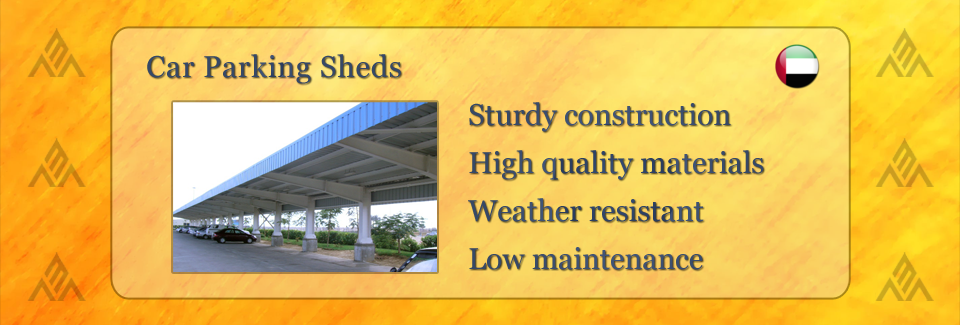
<style>
.page{position:relative;width:960px;height:325px}
.page>*{position:absolute;margin:0}
.t1{font:30px "Georgia";letter-spacing:0.025em;color:#364866}
.t2{font:30px/48px "Georgia";color:#394b6b}
</style>
<div class="page">
<p class="t1" style="left:147px;top:54px;width:254px;height:30px">Car Parking Sheds</p>
<p class="t2" style="left:468px;top:102px;width:296px;height:168px">Sturdy construction<br>High quality materials<br>Weather resistant<br>Low maintenance</p>
</div>
